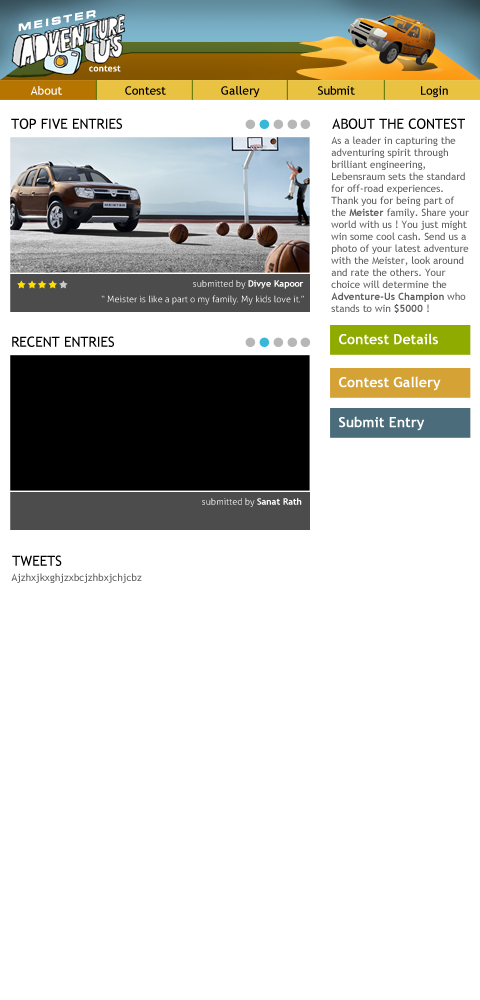
<style>
.page{position:relative;width:480px;height:1000px;background:#ffffff}
.page>*{position:absolute;margin:0}
.t1{font:13px "MetrostyleExtended-Bold";letter-spacing:0.17em;color:#ffffff;scale:0.95 1}
.t2{font:9.3px "Aller-Bold";color:#ffffff}
.t3{font:12px "TrebuchetMS";color:#ffffff}
.t4{font:12px "TrebuchetMS";color:#000000}
.t5{font:14px "TrebuchetMS";color:#000000;text-transform:uppercase}
.t6{font:10px "TrebuchetMS";color:#626262}
.t7{font:10px "TrebuchetMS-Bold";color:#626262}
.t8{font:9px "Aller-Light";color:#ffffff}
.t9{font:9px "TrebuchetMS-Bold";color:#ffffff}
.t10{font:14.2px "TrebuchetMS-Bold";color:#ffffff}
</style>
<div class="page">
<p class="t1" style="left:18px;top:10px;width:78px;height:22px;rotate:-11deg">MEISTER</p>
<p class="t2" style="left:89px;top:65px;width:32px;height:7px">contest</p>
<p class="t3" style="left:30px;top:86px;width:32px;height:9px">About</p>
<p class="t4" style="left:125px;top:86px;width:41px;height:9px">Contest</p>
<p class="t4" style="left:221px;top:86px;width:39px;height:12px">Gallery</p>
<p class="t4" style="left:318px;top:86px;width:37px;height:9px">Submit</p>
<p class="t4" style="left:421px;top:86px;width:27px;height:12px">Login</p>
<p class="t5" style="left:11px;top:118px;width:111px;height:11px">top five entries</p>
<p class="t5" style="left:332px;top:118px;width:133px;height:11px">About the Contest</p>
<p class="t6" style="left:331px;top:136px;width:138px;height:177px">As a leader in capturing the adventuring spirit through brilliant engineering, Lebensraum sets the standard for off-road experiences. Thank you for being part of the <span class="t7">Meister</span> family. Share your world with us ! You just might win some cool cash. Send us a photo of your latest adventure with the Meister, look around and rate the others. Your choice will determine the <span class="t7">Adventure-Us Champion</span> who stands to win <span class="t7">$5000</span> !</p>
<p class="t8" style="left:193px;top:280px;width:111px;height:9px">submitted by <span class="t9">Divye Kapoor</span></p>
<p class="t8" style="left:101px;top:295px;width:203px;height:10px">“ Meister is like a part o my family. My kids love it.”</p>
<p class="t5" style="left:12px;top:336px;width:102px;height:11px">RECENT ENTRIES</p>
<p class="t10" style="left:339px;top:333px;width:99px;height:12px">Contest Details</p>
<p class="t10" style="left:339px;top:376px;width:102px;height:15px">Contest Gallery</p>
<p class="t10" style="left:339px;top:416px;width:86px;height:15px">Submit Entry</p>
<p class="t8" style="left:202px;top:498px;width:100px;height:9px">submitted by <span class="t9">Sanat Rath</span></p>
<p class="t5" style="left:12px;top:555px;width:50px;height:11px">TWEETS</p>
<p class="t6" style="left:11px;top:573px;width:131px;height:10px">Ajzhxjkxghjzxbcjzhbxjchjcbz</p>
</div>
